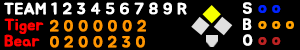
<style>
.page{position:relative;width:300px;height:50px;background:#000000}
.page>*{position:absolute;margin:0}
.t1{font:16px "BMJUA";color:#ffffff;font-weight:bold}
.t2{font:16px/16px "BMJUA";color:#ffffff;font-weight:bold}
.t3{font:16px/16px "BMJUA";color:#ffa200;font-weight:bold}
.t4{font:16px/16px "BMJUA";color:#0024ff;font-weight:bold}
.t5{font:16px/16px "BMJUA";color:#bb2323;font-weight:bold}
.t6{font:16px/16px "BMJUA";color:#ff0000;font-weight:bold}
.t7{font:16px/16px "BMJUA";color:#ff9600;font-weight:bold}
</style>
<div class="page">
<p class="t1" style="left:4px;top:2px;width:183px;height:13px">TEAM 1 2 3 4 5 6 7 8 9 R</p>
<p class="t2" style="left:243px;top:2px;width:10px;height:44px">S<br>B<br>O</p>
<p class="t3" style="left:258px;top:5px;width:36px;height:40px"><span class="t4">o o<br></span>o o o<br><span class="t5">o o</span></p>
<p class="t6" style="left:4px;top:18px;width:40px;height:29px">Tiger<br>Bear</p>
<p class="t7" style="left:50px;top:19px;width:96px;height:29px">2 0 0 0 0 0 2 <br>0 2 0 0 2 3 0</p>
</div>
